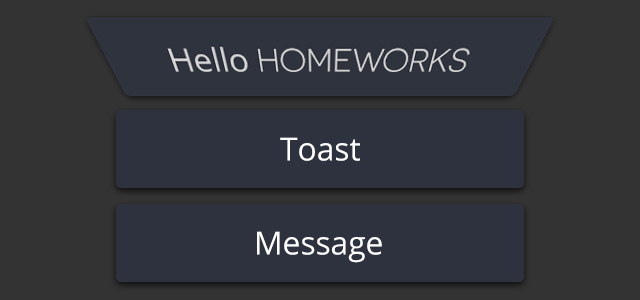
<style>
.page{position:relative;width:640px;height:300px;background:#333333}
.page>*{position:absolute;margin:0}
.t1{font:32px "OpenSans";color:#ffffff}
</style>
<div class="page">
<p class="t1" style="left:280px;top:137px;width:80px;height:24px">Toast</p>
<p class="t1" style="left:257px;top:231px;width:125px;height:32px">Message</p>
</div>
